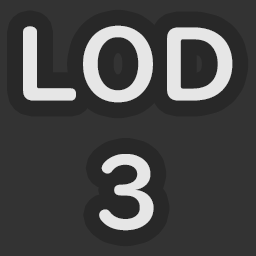
<style>
.page{position:relative;width:256px;height:256px;background:#333333}
.page>*{position:absolute;margin:0}
.t1{font:100px/128px "UDDigiKyokashoNK-B";color:#e6e6e6}
</style>
<div class="page">
<p class="t1" style="left:23px;top:25px;width:210px;height:206px;text-align:center">LOD<br>3</p>
</div>
